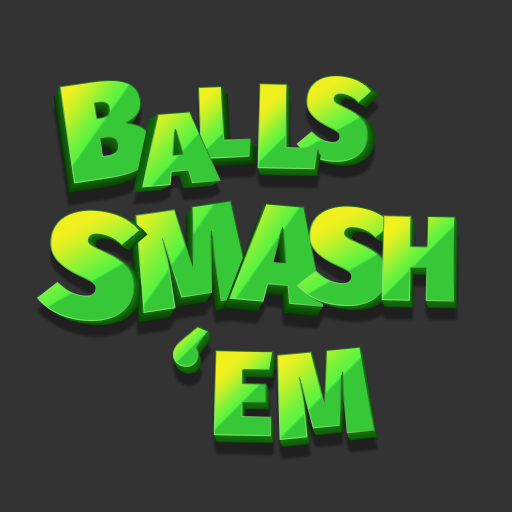
<style>
.page{position:relative;width:512px;height:512px;background:#333333}
.page>*{position:absolute;margin:0}
.t1{font:116.9px "FiraSans-Ultra"}
.t2{font:140.3px "FiraSans-Ultra"}
.t3{font:102.9px "FiraSans-Ultra"}
.t4{font:121.6px "FiraSans-Ultra"}
.t5{font:102.8px "FiraSans-Ultra";scale:1.14 1}
.t6{font:150.5px "FiraSans-Ultra";scale:1.06 1}
.t7{font:136px "FiraSans-Ultra";scale:1.09 1}
</style>
<div class="page">
<p class="t1" style="left:296px;top:75px;width:77px;height:87px;rotate:8deg">S</p>
<p class="t2" style="left:59px;top:80px;width:93px;height:104px;rotate:-9deg">B</p>
<p class="t3" style="left:198px;top:86px;width:53px;height:73px;rotate:-3deg">L</p>
<p class="t4" style="left:257px;top:83px;width:61px;height:87px;rotate:1deg">L</p>
<p class="t5" style="left:142px;top:111px;width:79px;height:77px;rotate:-5deg">A</p>
<p class="t6" style="left:36px;top:209px;width:105px;height:112px;rotate:8deg">S</p>
<p class="t2" style="left:135px;top:200px;width:118px;height:113px;rotate:-9deg">M</p>
<p class="t2" style="left:229px;top:203px;width:95px;height:104px;rotate:5deg">A</p>
<p class="t7" style="left:296px;top:205px;width:97px;height:102px;rotate:7deg">S</p>
<p class="t4" style="left:381px;top:215px;width:75px;height:87px;rotate:1deg">H</p>
<p class="t4" style="left:172px;top:326px;width:37px;height:41px;rotate:23deg">‘</p>
<p class="t4" style="left:213px;top:350px;width:61px;height:87px;rotate:1deg">E</p>
<p class="t4" style="left:277px;top:346px;width:98px;height:94px;rotate:-6deg">M</p>
</div>
